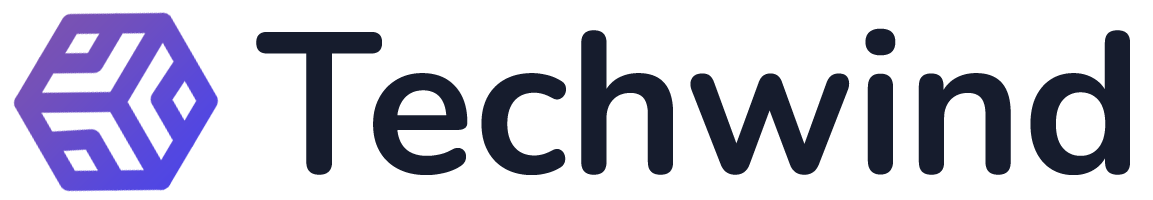
<style>
.page{position:relative;width:1153px;height:200px;background:#ffffff}
.page>*{position:absolute;margin:0}
.t1{font:200px "Nunito-Bold";color:#161c2d}
</style>
<div class="page">
<p class="t1" style="left:256px;top:28px;width:874px;height:147px">Techwind</p>
</div>
